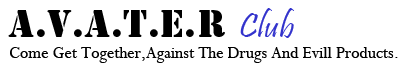
<style>
.page{position:relative;width:402px;height:70px;background:#ffffff}
.page>*{position:absolute;margin:0}
.t1{font:18px "Perpetua";color:#000000}
.t2{font:36px "StencilStd";color:#000000}
.t3{font:36px "Pristina-Regular";color:#3333cc}
</style>
<div class="page">
<p class="t1" style="left:8px;top:8px;width:390px;height:55px"><span class="t2">A.V.A.t.E.r </span><span class="t3">Club<br></span>Come Get Together,Against The Drugs And Evill Products.</p>
</div>
